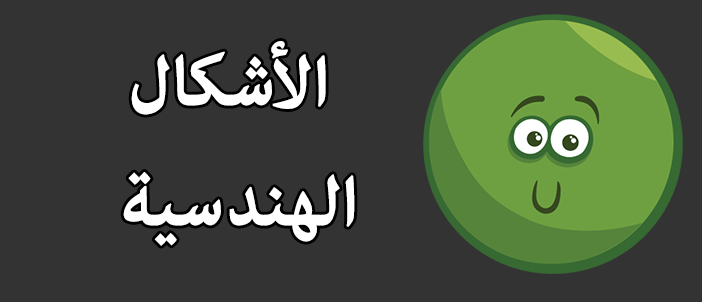
<style>
.page{position:relative;width:702px;height:302px;background:#333333}
.page>*{position:absolute;margin:0}
.t1{font:100px "AdobeArabic-Bold";color:#ffffff;font-weight:bold}
</style>
<div class="page">
<p class="t1" style="left:123px;top:41px;width:232px;height:205px;text-align:center">الأشكال<br> الهندسية</p>
</div>
